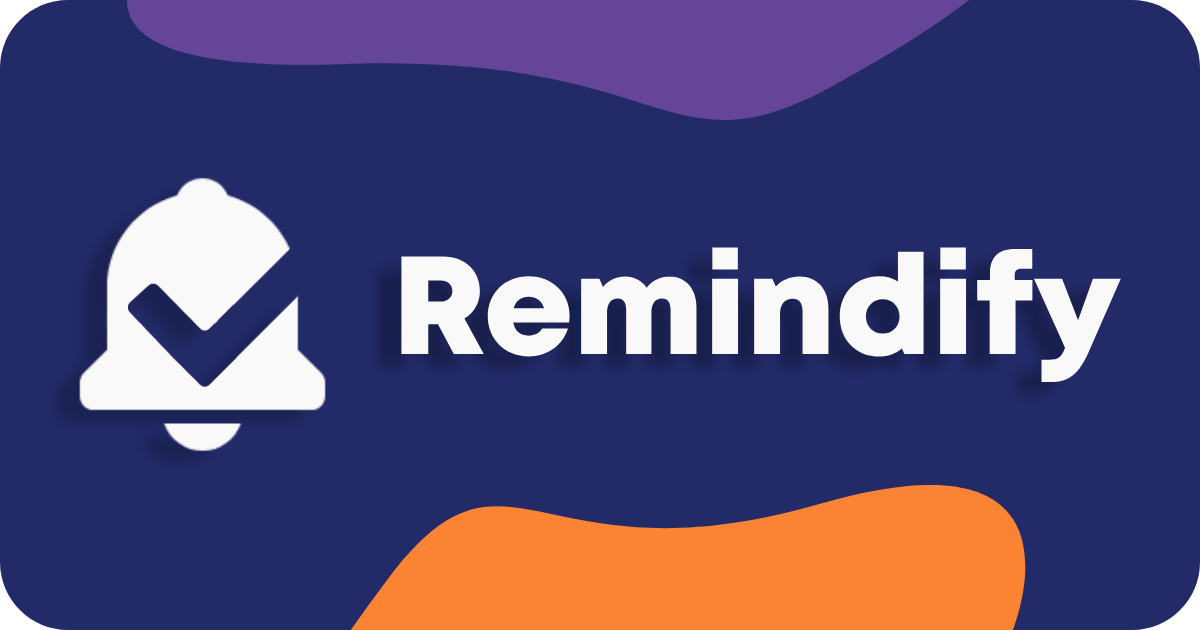
<style>
.page{position:relative;width:1200px;height:630px;background:#222a68}
.page>*{position:absolute;margin:0}
.t1{font:139.2px "Mont-HeavyDEMO";color:#faf9f9}
</style>
<div class="page">
<p class="t1" style="left:401px;top:247px;width:720px;height:135px">Remindify</p>
</div>
